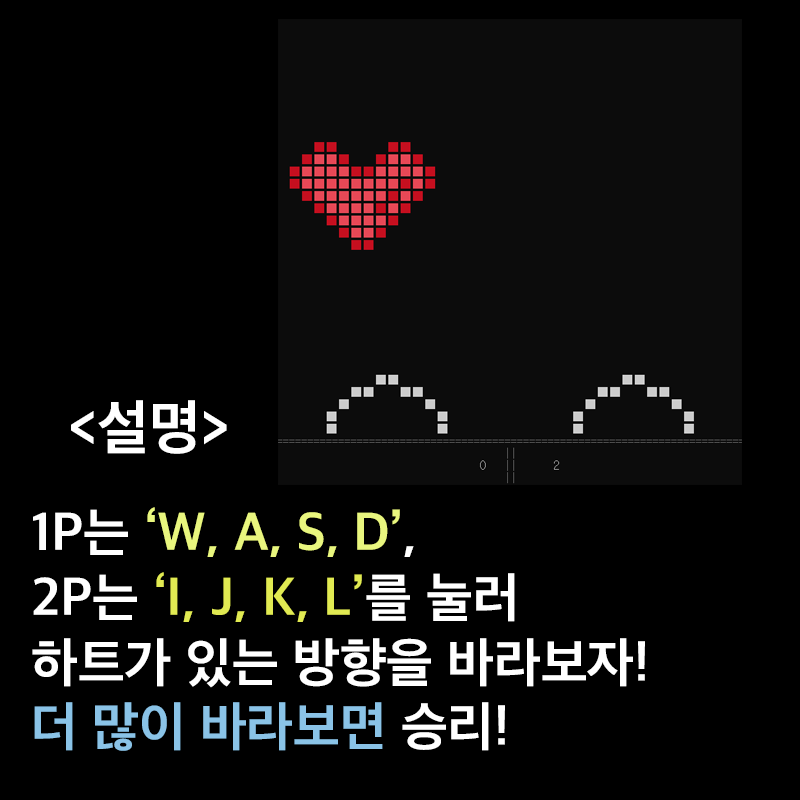
<style>
.page{position:relative;width:800px;height:800px;background:#000000}
.page>*{position:absolute;margin:0}
.t1{font:60px "AppleSDGothicNeoB00";color:#ffffff}
.t2{font:54px "AppleSDGothicNeoB00";color:#ffffff}
.t3{font:54px "AppleSDGothicNeoB00";color:#e9f67e}
.t4{font:54px "AppleSDGothicNeoB00";color:#e1ea52}
.t5{font:54px "AppleSDGothicNeoB00";color:#8ac3e7}
</style>
<div class="page">
<p class="t1" style="left:71px;top:400px;width:156px;height:54px">&lt;설명&gt;</p>
<p class="t2" style="left:32px;top:507px;width:613px;height:244px">1P는 <span class="t3">‘W, A, S, D’</span>,<br>2P는 <span class="t4">‘I, J, K, L’</span>를 눌러<br>하트가 있는 방향을 바라보자!<br><span class="t5">더 많이 바라보면</span> 승리!</p>
</div>
